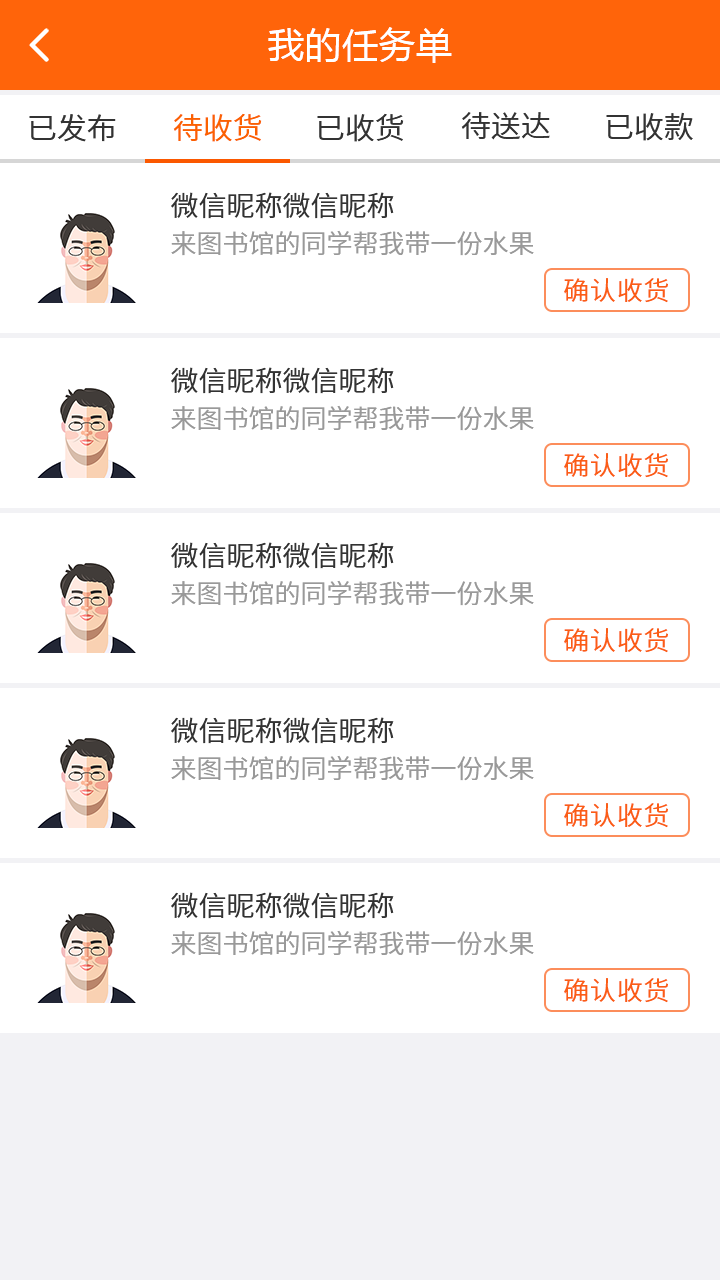
<style>
.page{position:relative;width:720px;height:1280px;background:#ffffff}
.page>*{position:absolute;margin:0}
.t1{font:36px "MicrosoftYaHei";letter-spacing:0.03em;color:#ffffff}
.t2{font:30px "NotoSansCJKsc-DemiLight";color:#fb6100;font-variant:small-caps}
.t3{font:30px "NotoSansCJKsc-DemiLight";color:#333333;font-variant:small-caps}
.t4{font:28px "NotoSansCJKsc-DemiLight";color:#333333;font-variant:small-caps}
.t5{font:26px "NotoSansCJKsc-DemiLight";color:#999999;font-variant:small-caps}
.t6{font:26px "NotoSansCJKsc-DemiLight";letter-spacing:0.03em;color:#fb5d15;font-variant:small-caps}
</style>
<div class="page">
<p class="t1" style="left:268px;top:27px;width:184px;height:36px">我的任务单</p>
<p class="t2" style="left:173px;top:113px;width:89px;height:29px">待收货</p>
<p class="t3" style="left:317px;top:113px;width:87px;height:29px">已收货</p>
<p class="t3" style="left:461px;top:112px;width:89px;height:28px">待送达</p>
<p class="t3" style="left:606px;top:112px;width:87px;height:29px">已收款</p>
<p class="t3" style="left:29px;top:114px;width:87px;height:28px">已发布</p>
<p class="t4" style="left:171px;top:192px;width:223px;height:27px">微信昵称微信昵称</p>
<p class="t5" style="left:171px;top:230px;width:363px;height:26px">来图书馆的同学帮我带一份水果</p>
<p class="t6" style="left:564px;top:278px;width:104px;height:25px">确认收货</p>
<p class="t4" style="left:171px;top:367px;width:223px;height:27px">微信昵称微信昵称</p>
<p class="t5" style="left:171px;top:405px;width:363px;height:26px">来图书馆的同学帮我带一份水果</p>
<p class="t6" style="left:564px;top:453px;width:104px;height:25px">确认收货</p>
<p class="t4" style="left:171px;top:542px;width:223px;height:27px">微信昵称微信昵称</p>
<p class="t5" style="left:171px;top:580px;width:363px;height:26px">来图书馆的同学帮我带一份水果</p>
<p class="t6" style="left:564px;top:628px;width:104px;height:25px">确认收货</p>
<p class="t4" style="left:171px;top:717px;width:223px;height:27px">微信昵称微信昵称</p>
<p class="t5" style="left:171px;top:755px;width:363px;height:26px">来图书馆的同学帮我带一份水果</p>
<p class="t6" style="left:564px;top:803px;width:104px;height:25px">确认收货</p>
<p class="t4" style="left:171px;top:892px;width:223px;height:27px">微信昵称微信昵称</p>
<p class="t5" style="left:171px;top:930px;width:363px;height:26px">来图书馆的同学帮我带一份水果</p>
<p class="t6" style="left:564px;top:978px;width:104px;height:25px">确认收货</p>
</div>
